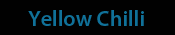
<style>
.page{position:relative;width:175px;height:35px;background:#010101}
.page>*{position:absolute;margin:0}
.t1{font:22px "MyriadPro-Semibold";color:#107199}
</style>
<div class="page">
<p class="t1" style="left:28px;top:10px;width:116px;height:16px">Yellow Chilli</p>
</div>
